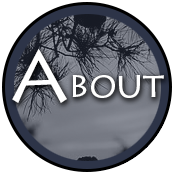
<style>
.page{position:relative;width:175px;height:175px;background:#ffffff}
.page>*{position:absolute;margin:0}
.t1{font:72px "LithosPro-Regular";color:#ffffff}
.t2{font:36px "LithosPro-Regular";color:#ffffff}
</style>
<div class="page">
<p class="t1" style="left:12px;top:49px;width:55px;height:54px">A</p>
<p class="t2" style="left:72px;top:75px;width:92px;height:23px">bout</p>
</div>
